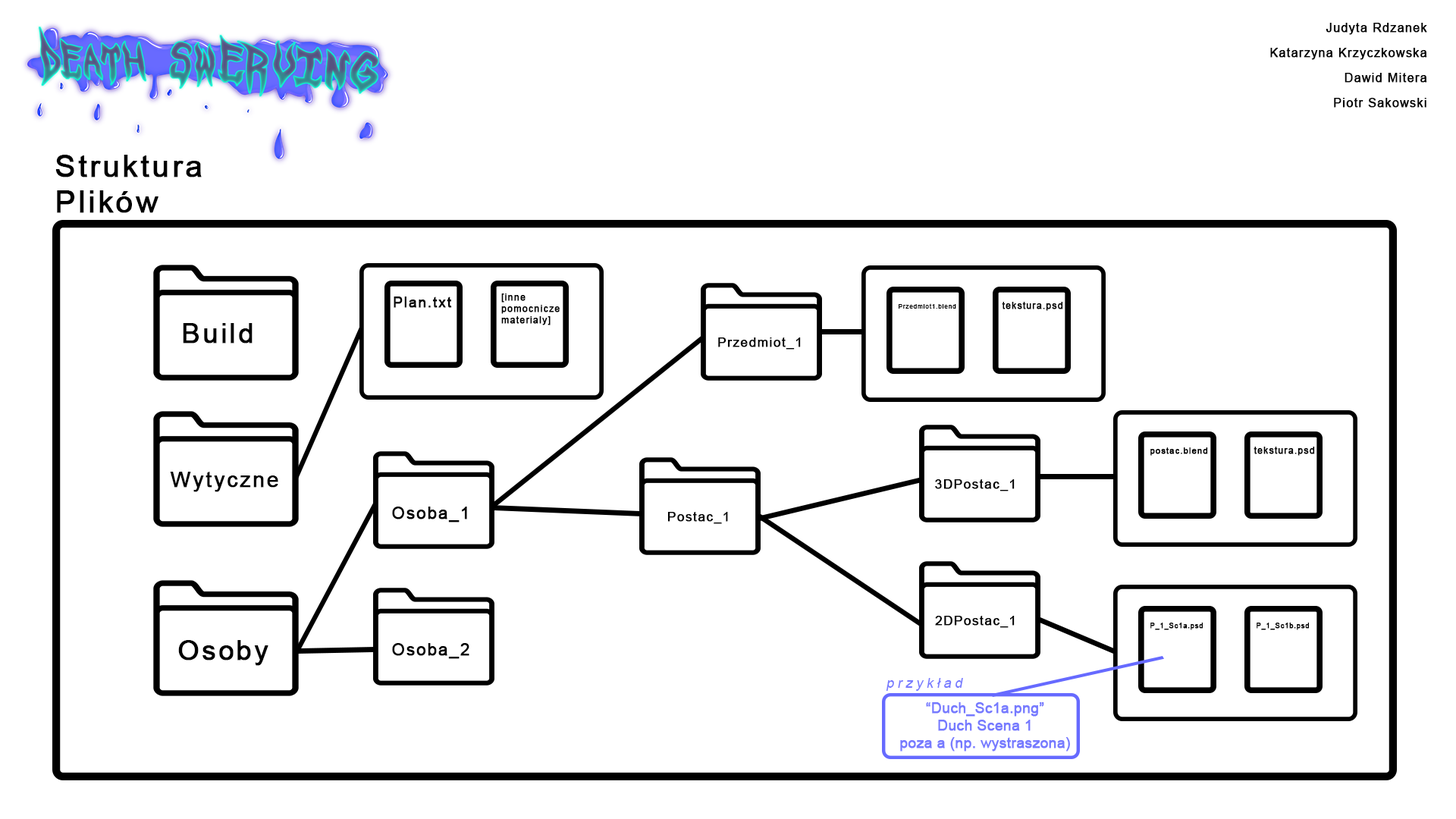
<style>
.page{position:relative;width:1456px;height:819px;background:#ffffff}
.page>*{position:absolute;margin:0}
.t1{font:11.8px/25px "ArialMT";letter-spacing:0.075em;color:#000000;font-weight:bold}
.t2{font:30.2px "ArialMT";letter-spacing:0.075em;color:#000000;font-weight:bold}
.t3{font:9.4px "ArialMT";letter-spacing:0.075em;color:#000000;font-weight:bold}
.t4{font:14.4px "ArialMT";letter-spacing:0.075em;color:#000000;font-weight:bold}
.t5{font:6.2px "ArialMT";letter-spacing:0.075em;color:#000000;font-weight:bold}
.t6{font:9.2px "ArialMT";letter-spacing:0.075em;color:#000000;font-weight:bold}
.t7{font:27.3px "ArialMT";letter-spacing:0.075em;color:#000000;font-weight:bold}
.t8{font:12.8px "ArialMT";letter-spacing:0.075em;color:#000000;font-weight:bold}
.t9{font:8.5px "ArialMT";letter-spacing:0.075em;color:#000000;font-weight:bold}
.t10{font:21.5px "ArialMT";letter-spacing:0.075em;color:#000000;font-weight:bold}
.t11{font:16.7px "ArialMT";letter-spacing:0.075em;color:#000000;font-weight:bold}
.t12{font:12.7px "ArialMT";letter-spacing:0.075em;color:#000000;font-weight:bold}
.t13{font:7px "ArialMT";letter-spacing:0.075em;color:#000000;font-weight:bold}
.t14{font:13.7px "ArialMT";letter-spacing:0.26em;color:#767aff;font-style:italic}
.t15{font:14.5px "ArialMT";color:#767aff;font-weight:bold}
</style>
<div class="page">
<p class="t1" style="left:1270px;top:23px;width:157px;height:85px;text-align:right">Judyta Rdzanek<br>Katarzyna Krzyczkowska<br>Dawid Mitera<br>Piotr Sakowski</p>
<p class="t2" style="left:55px;top:155px;width:147px;height:58px">Struktura<br>Plików</p>
<p class="t3" style="left:501px;top:293px;width:59px;height:32px">[inne<br>pomocnicze<br>materialy]</p>
<p class="t4" style="left:394px;top:297px;width:58px;height:11px">Plan.txt</p>
<p class="t5" style="left:899px;top:303px;width:57px;height:6px">Przedmiot1.blend</p>
<p class="t6" style="left:1002px;top:302px;width:61px;height:9px">tekstura.psd</p>
<p class="t7" style="left:183px;top:323px;width:70px;height:21px">Build</p>
<p class="t8" style="left:718px;top:337px;width:83px;height:13px">Przedmiot_1</p>
<p class="t9" style="left:1150px;top:447px;width:58px;height:9px">postac.blend</p>
<p class="t6" style="left:1254px;top:447px;width:61px;height:9px">tekstura.psd</p>
<p class="t10" style="left:170px;top:472px;width:108px;height:20px">Wytyczne</p>
<p class="t8" style="left:935px;top:479px;width:80px;height:12px">3DPostac_1</p>
<p class="t11" style="left:392px;top:507px;width:75px;height:15px">Osoba_1</p>
<p class="t8" style="left:667px;top:512px;width:61px;height:12px">Postac_1</p>
<p class="t12" style="left:935px;top:616px;width:80px;height:12px">2DPostac_1</p>
<p class="t13" style="left:1150px;top:623px;width:53px;height:7px">P_1_Sc1a.psd</p>
<p class="t13" style="left:1257px;top:623px;width:52px;height:7px">P_1_Sc1b.psd</p>
<p class="t7" style="left:178px;top:640px;width:90px;height:26px">Osoby</p>
<p class="t11" style="left:392px;top:643px;width:77px;height:16px">Osoba_2</p>
<p class="t14" style="left:886px;top:678px;width:77px;height:13px">przykład</p>
<p class="t15" style="left:900px;top:702px;width:170px;height:49px;text-align:center">“Duch_Sc1a.png”<br>Duch Scena 1<br>poza a (np. wystraszona)</p>
</div>
